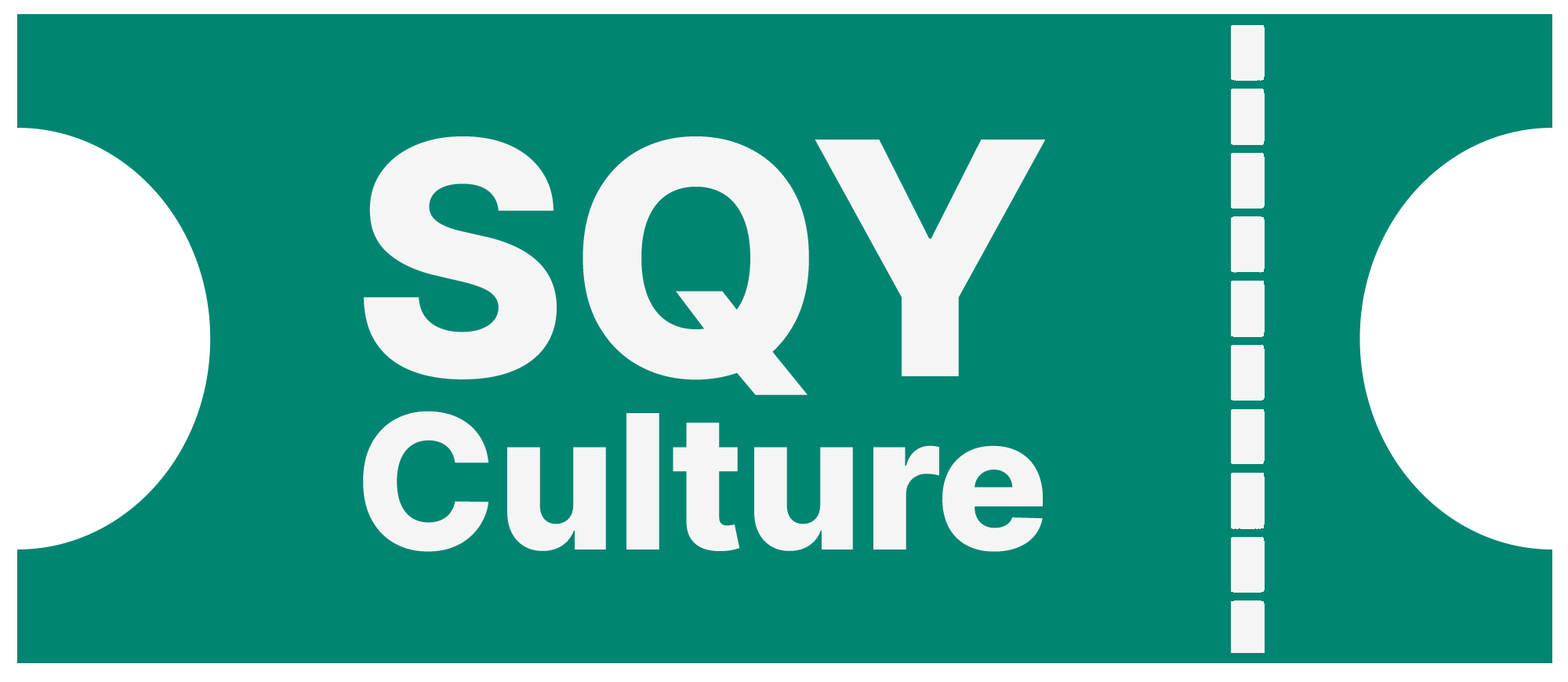
<style>
.page{position:relative;width:1568px;height:682px;background:#008573}
.page>*{position:absolute;margin:0}
.t1{font:325.4px "Inter-ExtraBold";color:#f5f5f5}
.t2{font:187.4px "Inter-ExtraBold";color:#f5f5f5}
</style>
<div class="page">
<p class="t1" style="left:364px;top:136px;width:682px;height:259px">SQY</p>
<p class="t2" style="left:363px;top:411px;width:680px;height:141px">Culture</p>
</div>
